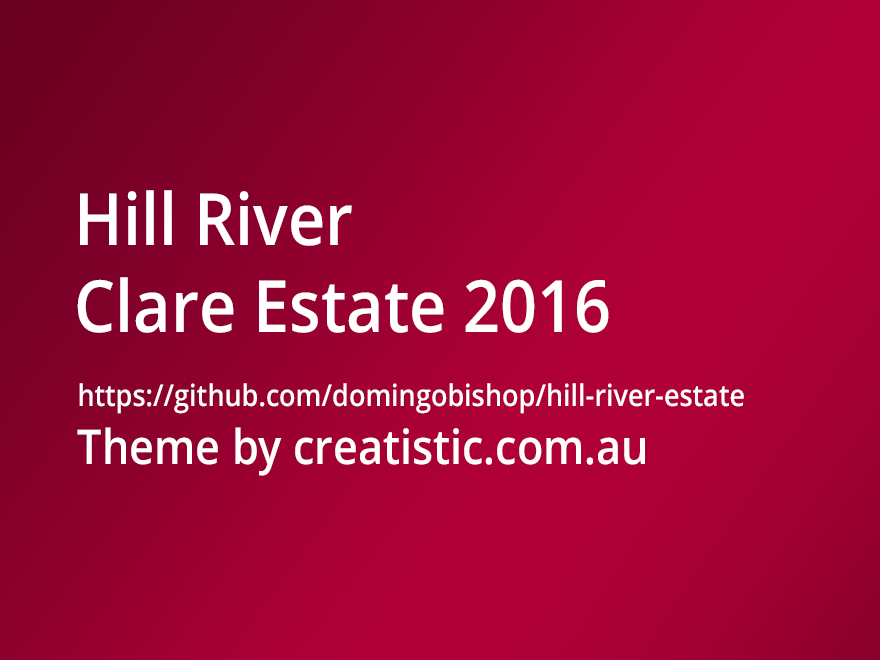
<style>
.page{position:relative;width:880px;height:660px}
.page>*{position:absolute;margin:0}
.t1{font:72px "OpenSans-Semibold";color:#ffffff;scale:0.9 1}
.t2{font:30px "OpenSans-Semibold";color:#ffffff;scale:0.9 1}
.t3{font:48px "OpenSans-Semibold";color:#ffffff;scale:0.9 1}
</style>
<div class="page">
<p class="t1" style="left:77px;top:190px;width:532px;height:143px">Hill River <br>Clare Estate 2016</p>
<p class="t2" style="left:77px;top:383px;width:667px;height:93px">https://github.com/domingobishop/hill-river-estate<br><span class="t3">Theme by creatistic.com.au</span></p>
</div>
